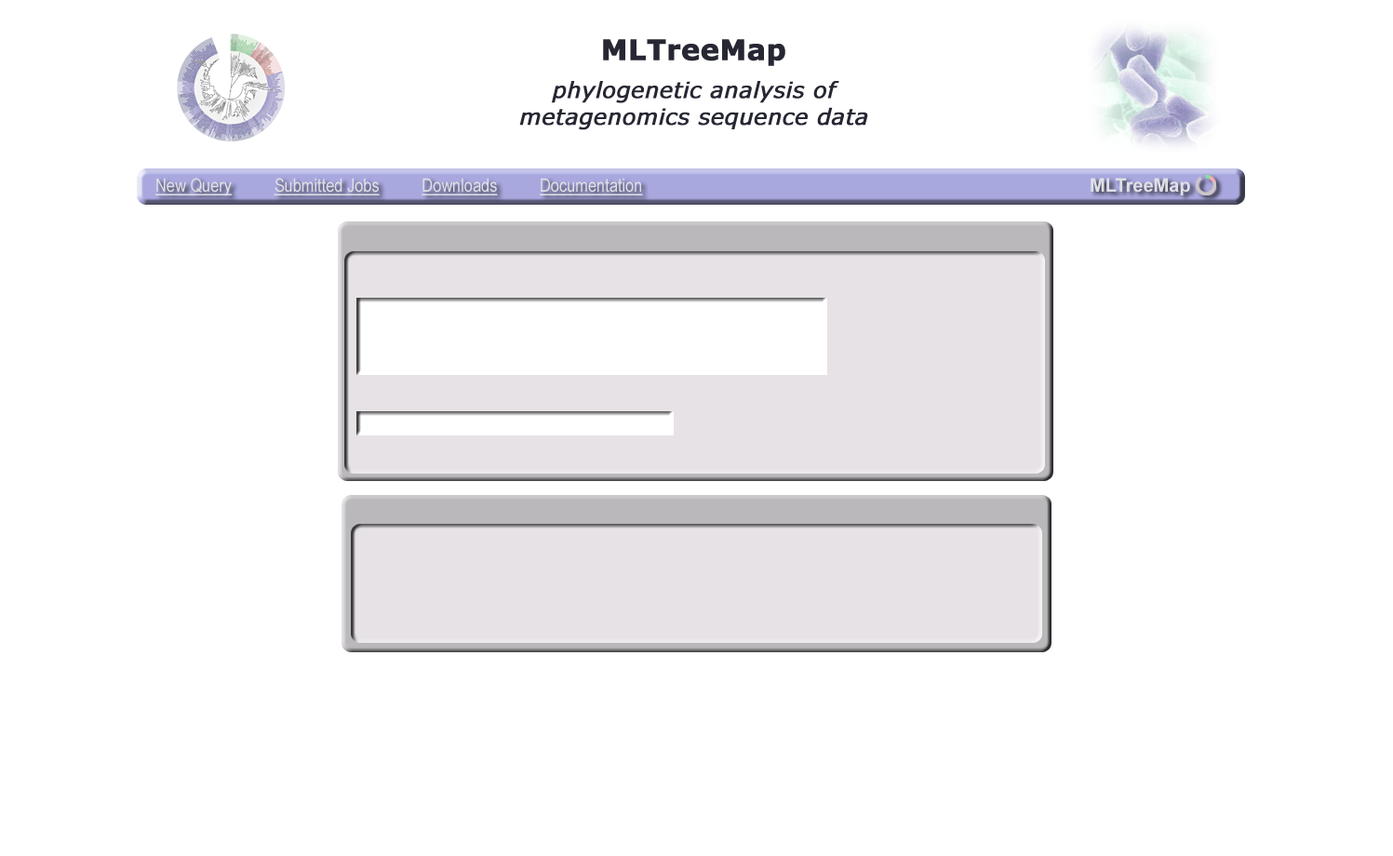
<style>
.page{position:relative;width:1393px;height:856px;background:#ffffff}
.page>*{position:absolute;margin:0}
.t1{font:18.6px "ArialNarrow";color:#e0e0e5;text-decoration:underline}
.t2{font:18.6px "Arial-BoldMT";color:#e0e0e5}
</style>
<div class="page">
<p class="t1" style="left:155px;top:178px;width:488px;height:18px">New Query          Submitted Jobs          Downloads          Documentation</p>
<p class="t2" style="left:1091px;top:178px;width:99px;height:17px">MLTreeMap</p>
</div>
